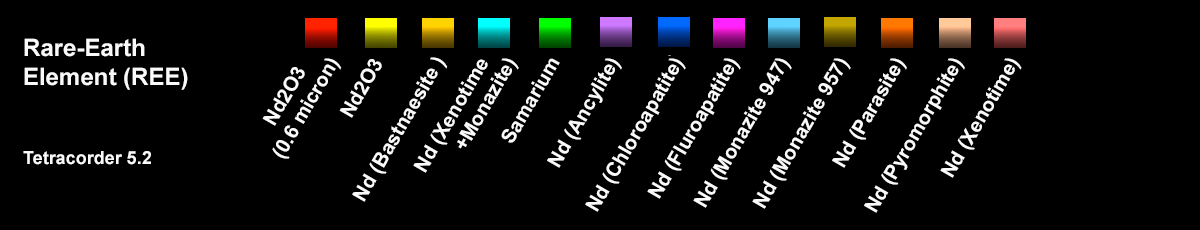
<style>
.page{position:relative;width:1200px;height:230px;background:#000000}
.page>*{position:absolute;margin:0}
.t1{font:24px "Arial-BoldMT";color:#f9faf9}
.t2{font:18px "Arial-BoldMT";color:#f9faf9}
.t3{font:20px "Arial-BoldMT";color:#f9faf9}
</style>
<div class="page">
<p class="t1" style="left:23px;top:38px;width:165px;height:127px">Rare-Earth<br>Element (REE)<br><br><br><span class="t2">Tetracorder 5.2</span></p>
<p class="t3" style="left:262px;top:58px;width:80px;height:101px;text-align:center;rotate:-60deg">Nd2O3<br>(0.6 micron)</p>
<p class="t3" style="left:339px;top:59px;width:43px;height:59px;rotate:-60deg">Nd2O3</p>
<p class="t3" style="left:352px;top:57px;width:96px;height:145px;rotate:-60deg">Nd (Bastnaesite )</p>
<p class="t3" style="left:413px;top:58px;width:106px;height:115px;rotate:-60deg">Nd (Xenotime<br>       +Monazite)</p>
<p class="t3" style="left:501px;top:58px;width:59px;height:85px;rotate:-60deg">Samarium</p>
<p class="t3" style="left:547px;top:58px;width:75px;height:110px;rotate:-60deg">Nd (Ancylite)</p>
<p class="t3" style="left:585px;top:58px;width:101px;height:154px;rotate:-60deg">Nd (Chloroapatite)</p>
<p class="t3" style="left:647px;top:58px;width:94px;height:141px;rotate:-60deg">Nd (Fluroapatite)</p>
<p class="t3" style="left:693px;top:58px;width:99px;height:150px;rotate:-60deg">Nd (Monazite 947)</p>
<p class="t3" style="left:752px;top:58px;width:99px;height:151px;rotate:-60deg"><span class="t1">  </span>Nd (Monazite 957)</p>
<p class="t3" style="left:832px;top:58px;width:75px;height:110px;rotate:-60deg"><span class="t2"> </span>Nd (Parasite)</p>
<p class="t3" style="left:864px;top:58px;width:101px;height:155px;rotate:-60deg"><span class="t2"> </span>Nd (Pyromorphite)</p>
<p class="t3" style="left:940px;top:58px;width:82px;height:120px;rotate:-60deg">Nd (Xenotime)</p>
</div>
